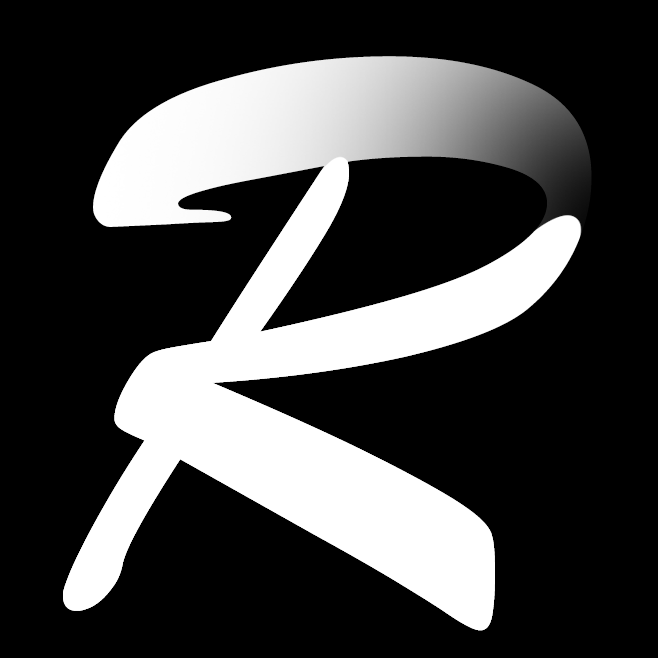
<style>
.page{position:relative;width:658px;height:658px;background:#000000}
.page>*{position:absolute;margin:0}
.t1{font:847.4px "STXingkaiSC-Bold";color:#ffffff;scale:0.87 1}
</style>
<div class="page">
<p class="t1" style="left:63px;top:56px;width:529px;height:575px">R</p>
<p class="t1" style="left:63px;top:56px;width:529px;height:575px">R</p>
</div>
